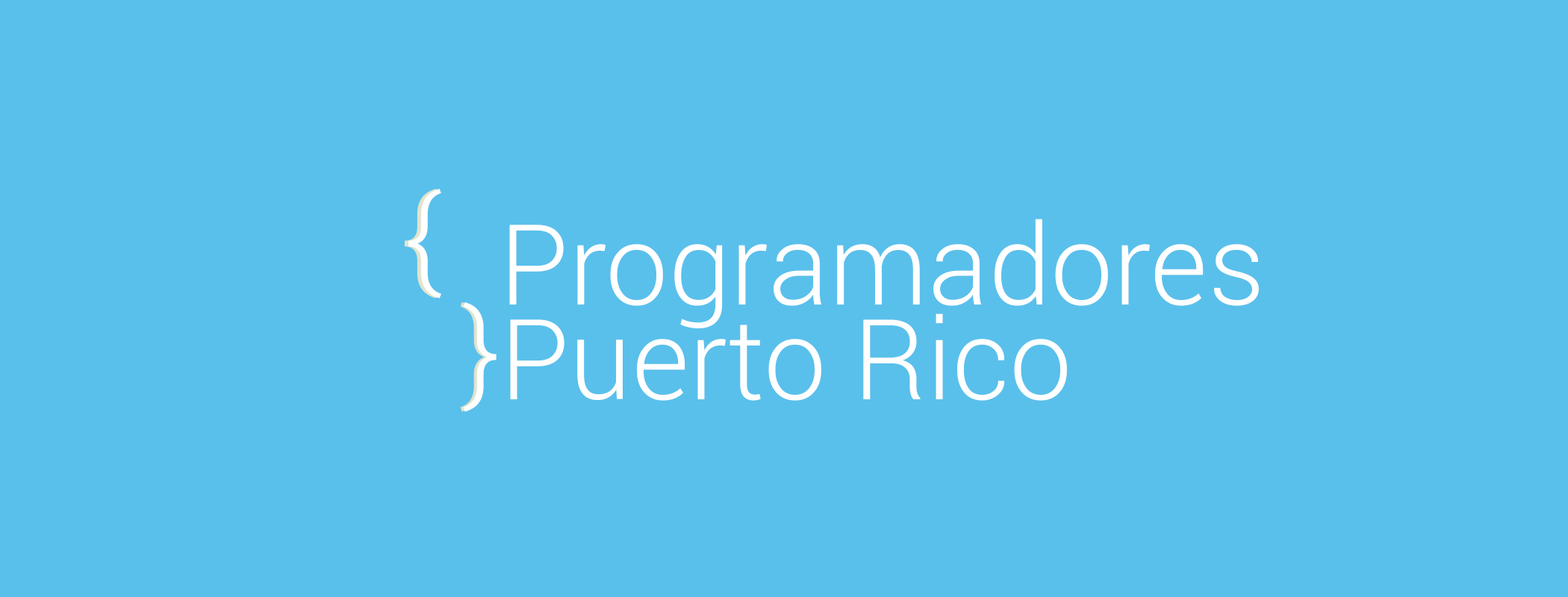
<style>
.page{position:relative;width:1568px;height:597px;background:#59c0eb}
.page>*{position:absolute;margin:0}
.t1{font:112px "Roboto-Light"}
.t2{font:112px "Roboto-Light";color:#ffffff}
</style>
<div class="page">
<p class="t1" style="left:404px;top:189px;width:34px;height:110px">{</p>
<p class="t2" style="left:408px;top:189px;width:33px;height:110px">{</p>
<p class="t2" style="left:509px;top:219px;width:750px;height:110px">Programadores</p>
<p class="t1" style="left:460px;top:302px;width:34px;height:110px">}</p>
<p class="t2" style="left:463px;top:302px;width:34px;height:110px">}</p>
<p class="t2" style="left:510px;top:314px;width:557px;height:87px">Puerto Rico</p>
</div>
